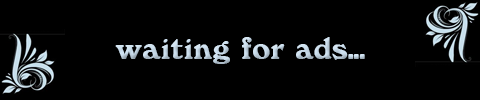
<style>
.page{position:relative;width:480px;height:100px;background:#000000}
.page>*{position:absolute;margin:0}
.t1{font:28px "Windsor-Bold";color:#c4d6e5}
</style>
<div class="page">
<p class="t1" style="left:115px;top:37px;width:250px;height:27px">waiting for ads...</p>
</div>
